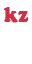
<style>
.page{position:relative;width:32px;height:64px;background:#ffffff}
.page>*{position:absolute;margin:0}
.t1{font:21.3px "a_CooperBlack";letter-spacing:0.025em;color:#cf3046;scale:0.9 1}
</style>
<div class="page">
<p class="t1" style="left:3px;top:7px;width:26px;height:16px">kz</p>
</div>
